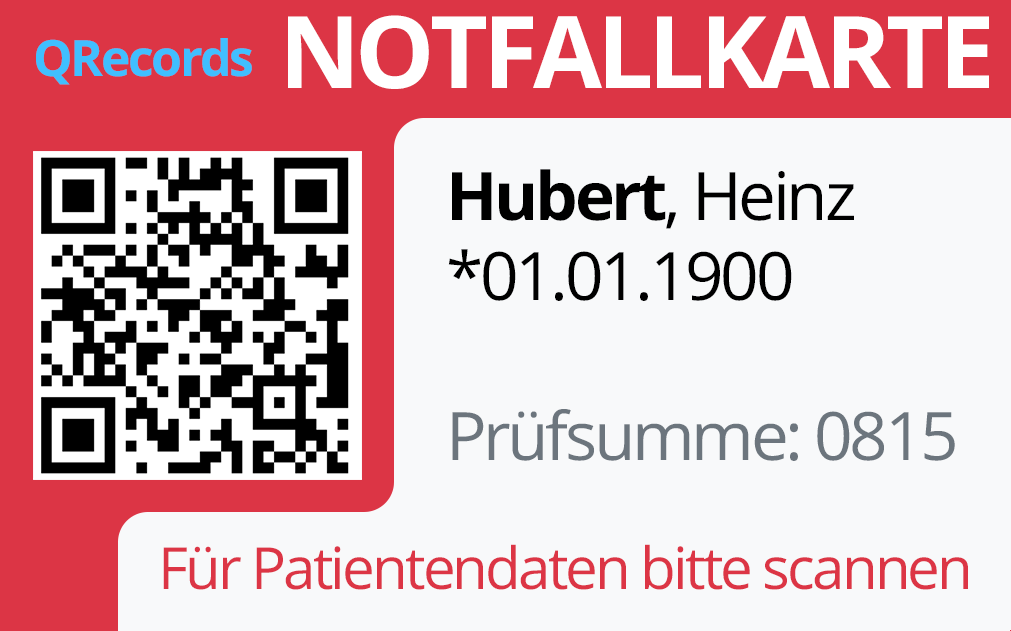
<style>
.page{position:relative;width:1011px;height:631px;background:#f8f9fa}
.page>*{position:absolute;margin:0}
.t1{font:100px "OpenSans-Bold";letter-spacing:-0.05em;color:#ffffff}
.t2{font:50px "OpenSans-Bold";letter-spacing:-0.05em;color:#40bfff}
.t3{font:66.7px "OpenSans";letter-spacing:-0.05em;color:#000000}
.t4{font:66.7px "OpenSans-Bold";letter-spacing:-0.05em;color:#000000}
.t5{font:66.7px "OpenSans";letter-spacing:-0.05em;color:#6c757d}
.t6{font:58.3px "OpenSans";letter-spacing:-0.05em;color:#dc3545}
</style>
<div class="page">
<p class="t1" style="left:288px;top:15px;width:701px;height:74px">NOTFALLKARTE</p>
<p class="t2" style="left:36px;top:38px;width:216px;height:47px">QRecords</p>
<p class="t3" style="left:448px;top:169px;width:507px;height:292px"><span class="t4">Hubert</span>, Heinz<br>*01.01.1900<br><br><span class="t5">Prüfsumme: 0815</span></p>
<p class="t6" style="left:163px;top:544px;width:805px;height:46px">Für Patientendaten bitte scannen</p>
</div>
